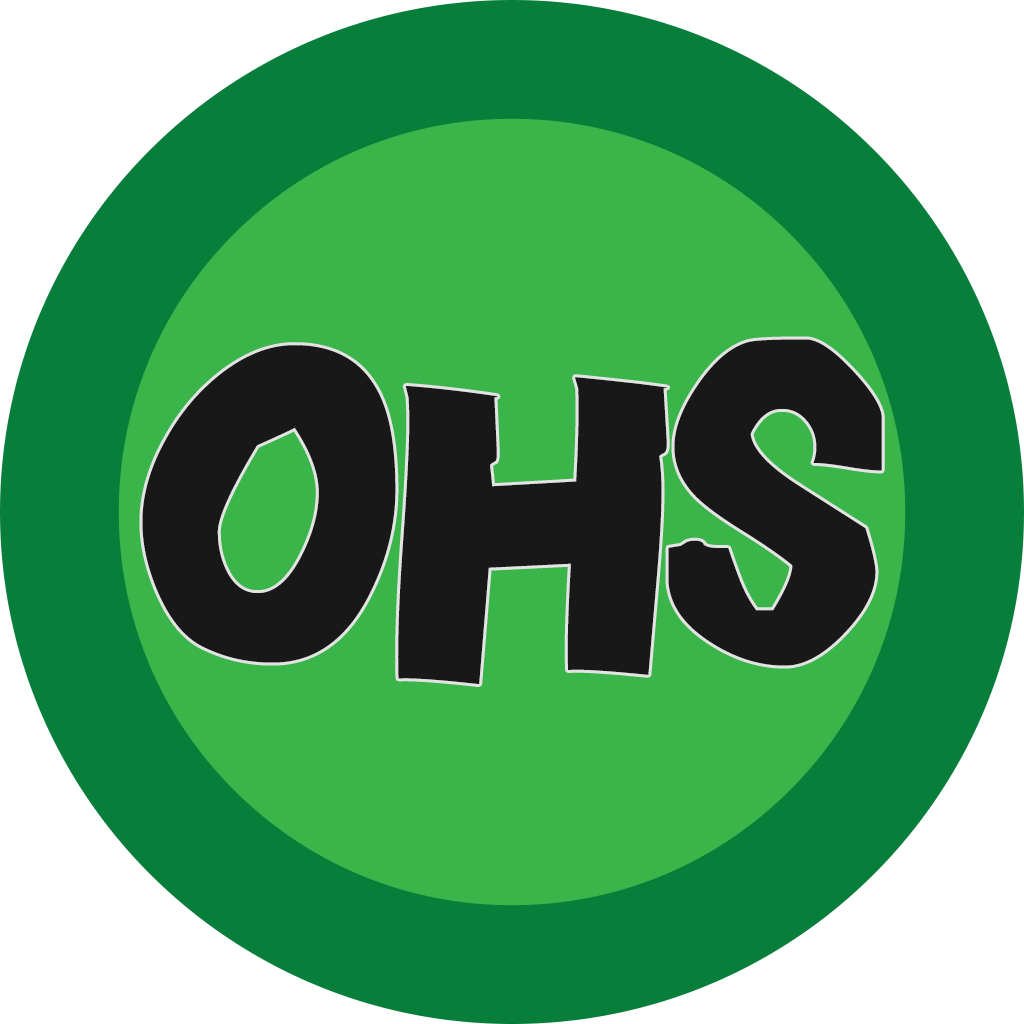
<style>
.page{position:relative;width:1024px;height:1024px;background:#077f3a}
.page>*{position:absolute;margin:0}
.t1{font:400px "SeriesOrbit";color:#181818}
</style>
<div class="page">
<p class="t1" style="left:142px;top:339px;width:740px;height:345px">OHS</p>
</div>
